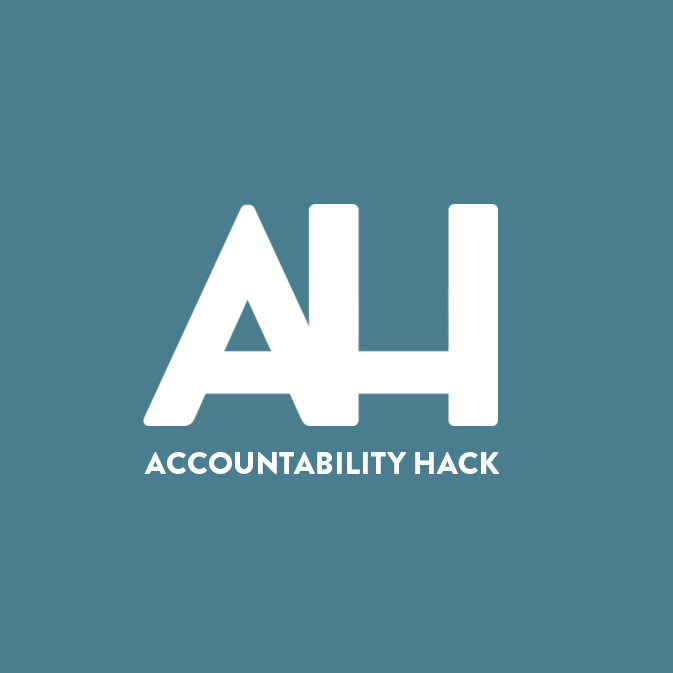
<style>
.page{position:relative;width:673px;height:673px;background:#4a7e8e}
.page>*{position:absolute;margin:0}
.t1{font:31.3px "BrandonGrotesque-Black";color:#fefefe}
</style>
<div class="page">
<p class="t1" style="left:144px;top:452px;width:355px;height:23px">ACCOUNTABILITY HACK</p>
</div>
